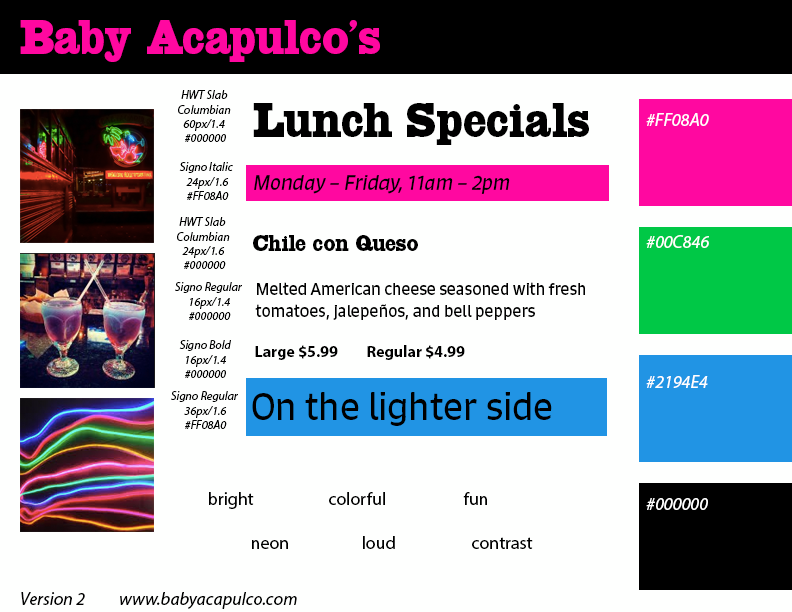
<style>
.page{position:relative;width:792px;height:612px;background:#fefffe}
.page>*{position:absolute;margin:0}
.t1{font:48px "HWTSlabColumbian";color:#ff08a0}
.t2{font:12px "MyriadPro-It";color:#000000}
.t3{font:48px "HWTSlabColumbian";color:#000000}
.t4{font:18px "MyriadPro-It";color:#ffffff}
.t5{font:20px "Signo-Italic";color:#000000}
.t6{font:22px "HWTSlabColumbian";color:#000000}
.t7{font:16px/22px "Signo-Regular";color:#000000}
.t8{font:16px "MyriadPro-Bold";color:#000000}
.t9{font:36px "Signo-Regular";color:#000000}
.t10{font:18px "MyriadPro-Regular";color:#000000}
.t11{font:18px "MyriadPro-It";color:#000000}
</style>
<div class="page">
<p class="t1" style="left:20px;top:20px;width:360px;height:42px">Baby Acapulco’s</p>
<p class="t2" style="left:178px;top:90px;width:53px;height:52px;text-align:center">HWT Slab <br>Columbian <br>60px/1.4 <br>#000000</p>
<p class="t3" style="left:253px;top:103px;width:336px;height:42px">Lunch Specials</p>
<p class="t4" style="left:646px;top:113px;width:63px;height:13px">#FF08A0</p>
<p class="t2" style="left:179px;top:162px;width:54px;height:38px;text-align:center">Signo Italic<br> 24px/1.6<br> #FF08A0</p>
<p class="t5" style="left:254px;top:175px;width:256px;height:19px">Monday – Friday, 11am – 2pm</p>
<p class="t2" style="left:177px;top:217px;width:53px;height:52px;text-align:center">HWT Slab <br>Columbian<br>24px/1.6<br> #000000</p>
<p class="t6" style="left:253px;top:235px;width:165px;height:16px">Chile con Queso</p>
<p class="t4" style="left:646px;top:235px;width:63px;height:13px">#00C846</p>
<p class="t2" style="left:175px;top:282px;width:67px;height:38px;text-align:center">Signo Regular<br> 16px/1.4<br> #000000</p>
<p class="t7" style="left:255px;top:282px;width:330px;height:38px">Melted American cheese seasoned with fresh <br>tomatoes, jalepeños, and bell peppers</p>
<p class="t2" style="left:179px;top:340px;width:52px;height:38px;text-align:center">Signo Bold<br>16px/1.4<br>#000000</p>
<p class="t8" style="left:255px;top:345px;width:83px;height:15px">Large $5.99</p>
<p class="t8" style="left:367px;top:345px;width:98px;height:15px">Regular $4.99</p>
<p class="t4" style="left:646px;top:375px;width:62px;height:13px">#2194E4</p>
<p class="t2" style="left:171px;top:391px;width:67px;height:38px;text-align:center">Signo Regular<br> 36px/1.6<br> #FF08A0</p>
<p class="t9" style="left:252px;top:392px;width:300px;height:34px">On the lighter side</p>
<p class="t10" style="left:209px;top:492px;width:45px;height:17px">bright</p>
<p class="t10" style="left:329px;top:492px;width:56px;height:13px">colorful</p>
<p class="t10" style="left:463px;top:492px;width:24px;height:13px">fun</p>
<p class="t4" style="left:646px;top:498px;width:62px;height:12px">#000000</p>
<p class="t10" style="left:252px;top:540px;width:36px;height:9px">neon</p>
<p class="t10" style="left:363px;top:536px;width:32px;height:13px">loud</p>
<p class="t10" style="left:472px;top:537px;width:61px;height:12px">contrast</p>
<p class="t11" style="left:21px;top:592px;width:64px;height:13px">Version 2</p>
<p class="t11" style="left:120px;top:592px;width:177px;height:17px">www.babyacapulco.com</p>
</div>
